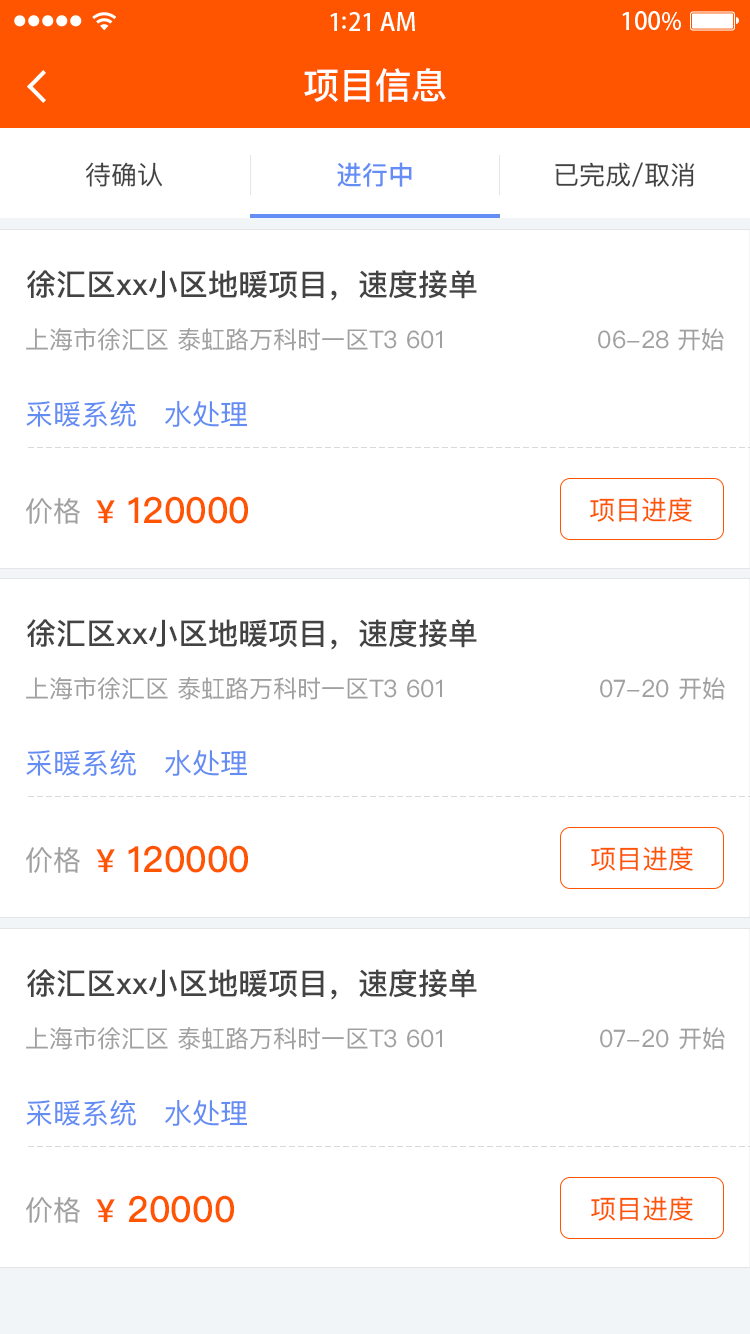
<style>
.page{position:relative;width:750px;height:1334px;background:#ffffff}
.page>*{position:absolute;margin:0}
.t1{font:36px "PingFangSC-Medium";color:#ffffff}
.t2{font:26px "PingFangSC-Regular";color:#434343}
.t3{font:26px "PingFangSC-Medium";color:#648df6}
.t4{font:30px "PingFangSC-Medium";color:#434343}
.t5{font:24px "PingFangSC-Regular";color:#a0a0a0}
.t6{font:28px "PingFangSC-Regular";color:#648df4}
.t7{font:36px "PingFangSC-Medium";color:#ff5400}
.t8{font:32px "PingFangSC-Medium";color:#ff5400}
.t9{font:26px "PingFangSC-Regular";color:#ff5400}
.t10{font:28px "PingFangSC-Regular";color:#a0a0a0}
</style>
<div class="page">
<p class="t1" style="left:304px;top:68px;width:142px;height:34px">项目信息</p>
<p class="t2" style="left:86px;top:162px;width:77px;height:25px">待确认</p>
<p class="t3" style="left:337px;top:162px;width:75px;height:25px">进行中</p>
<p class="t2" style="left:555px;top:162px;width:140px;height:25px">已完成/取消</p>
<p class="t4" style="left:27px;top:270px;width:450px;height:31px">徐汇区xx小区地暖项目，速度接单</p>
<p class="t5" style="left:26px;top:328px;width:416px;height:23px">上海市徐汇区 泰虹路万科时一区T3 601</p>
<p class="t5" style="left:598px;top:328px;width:126px;height:23px">06-28 开始</p>
<p class="t6" style="left:26px;top:400px;width:110px;height:27px">采暖系统</p>
<p class="t6" style="left:165px;top:400px;width:82px;height:27px">水处理</p>
<p class="t7" style="left:96px;top:496px;width:152px;height:28px"><span class="t8">¥</span> 120000</p>
<p class="t9" style="left:590px;top:497px;width:102px;height:25px">项目进度</p>
<p class="t10" style="left:26px;top:498px;width:54px;height:26px">价格</p>
<p class="t4" style="left:27px;top:619px;width:450px;height:31px">徐汇区xx小区地暖项目，速度接单</p>
<p class="t5" style="left:26px;top:677px;width:416px;height:23px">上海市徐汇区 泰虹路万科时一区T3 601</p>
<p class="t5" style="left:600px;top:677px;width:125px;height:23px">07-20 开始</p>
<p class="t6" style="left:26px;top:749px;width:110px;height:27px">采暖系统</p>
<p class="t6" style="left:165px;top:749px;width:82px;height:27px">水处理</p>
<p class="t7" style="left:96px;top:845px;width:152px;height:28px"><span class="t8">¥</span> 120000</p>
<p class="t9" style="left:591px;top:846px;width:102px;height:25px">项目进度</p>
<p class="t10" style="left:26px;top:847px;width:54px;height:26px">价格</p>
<p class="t4" style="left:27px;top:969px;width:450px;height:31px">徐汇区xx小区地暖项目，速度接单</p>
<p class="t5" style="left:26px;top:1027px;width:416px;height:23px">上海市徐汇区 泰虹路万科时一区T3 601</p>
<p class="t5" style="left:600px;top:1027px;width:125px;height:23px">07-20 开始</p>
<p class="t6" style="left:26px;top:1099px;width:110px;height:27px">采暖系统</p>
<p class="t6" style="left:165px;top:1099px;width:82px;height:27px">水处理</p>
<p class="t10" style="left:26px;top:1197px;width:54px;height:26px">价格</p>
<p class="t7" style="left:96px;top:1195px;width:138px;height:28px"><span class="t8">¥</span> 20000</p>
<p class="t9" style="left:591px;top:1196px;width:102px;height:25px">项目进度</p>
</div>
